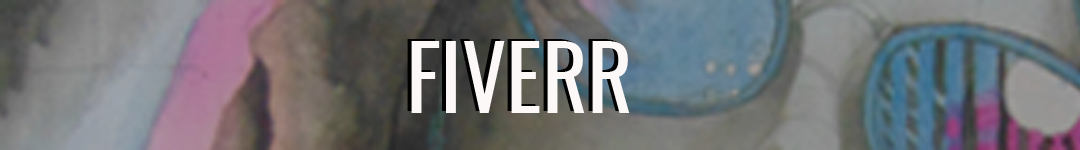
<style>
.page{position:relative;width:1080px;height:150px}
.page>*{position:absolute;margin:0}
.t1{font:87.5px "Oswald-Regular";color:#fcf8f8}
</style>
<div class="page">
<p class="t1" style="left:411px;top:41px;width:219px;height:72px">FIVERR</p>
</div>
